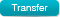
<style>
.page{position:relative;width:60px;height:17px}
.page>*{position:absolute;margin:0}
.t1{font:15px "DSNAdiRek";color:#ffffff}
</style>
<div class="page">
<p class="t1" style="left:11px;top:4px;width:37px;height:7px">Transfer</p>
</div>
